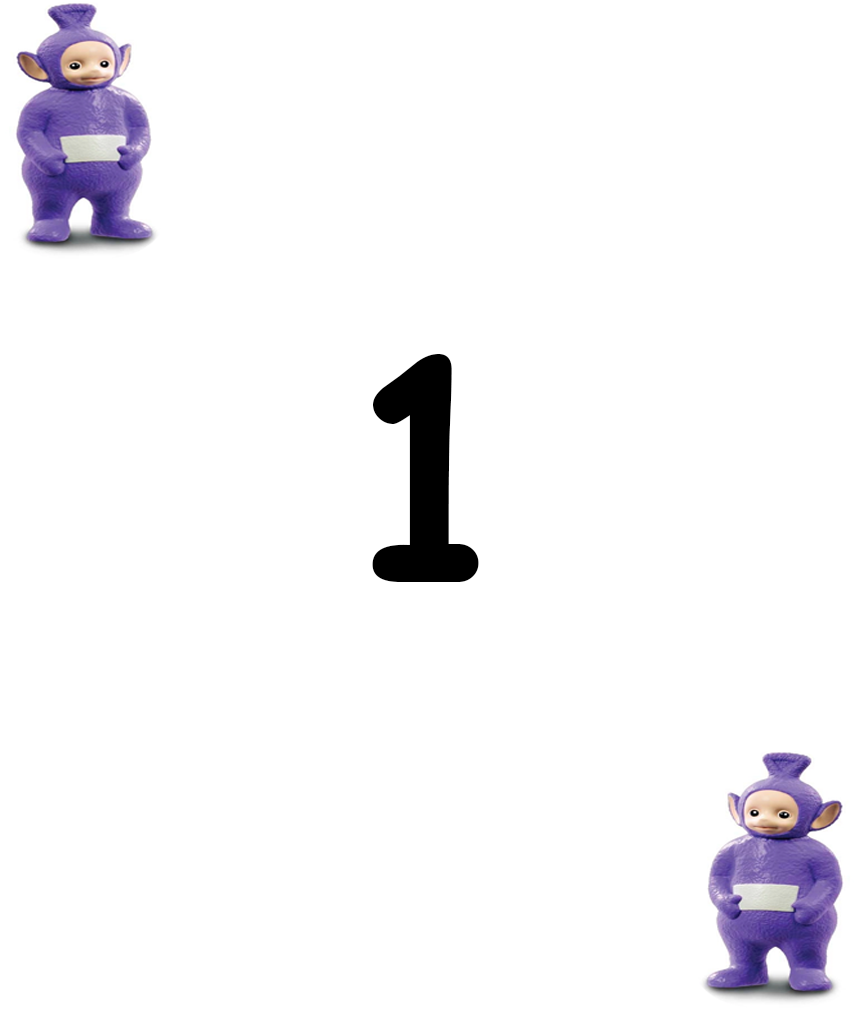
<style>
.page{position:relative;width:859px;height:1009px;background:#ffffff}
.page>*{position:absolute;margin:0}
.t1{font:300px "ComicSansMS-Bold";color:#000000;font-variant:small-caps}
</style>
<div class="page">
<p class="t1" style="left:372px;top:354px;width:107px;height:228px">1</p>
</div>
